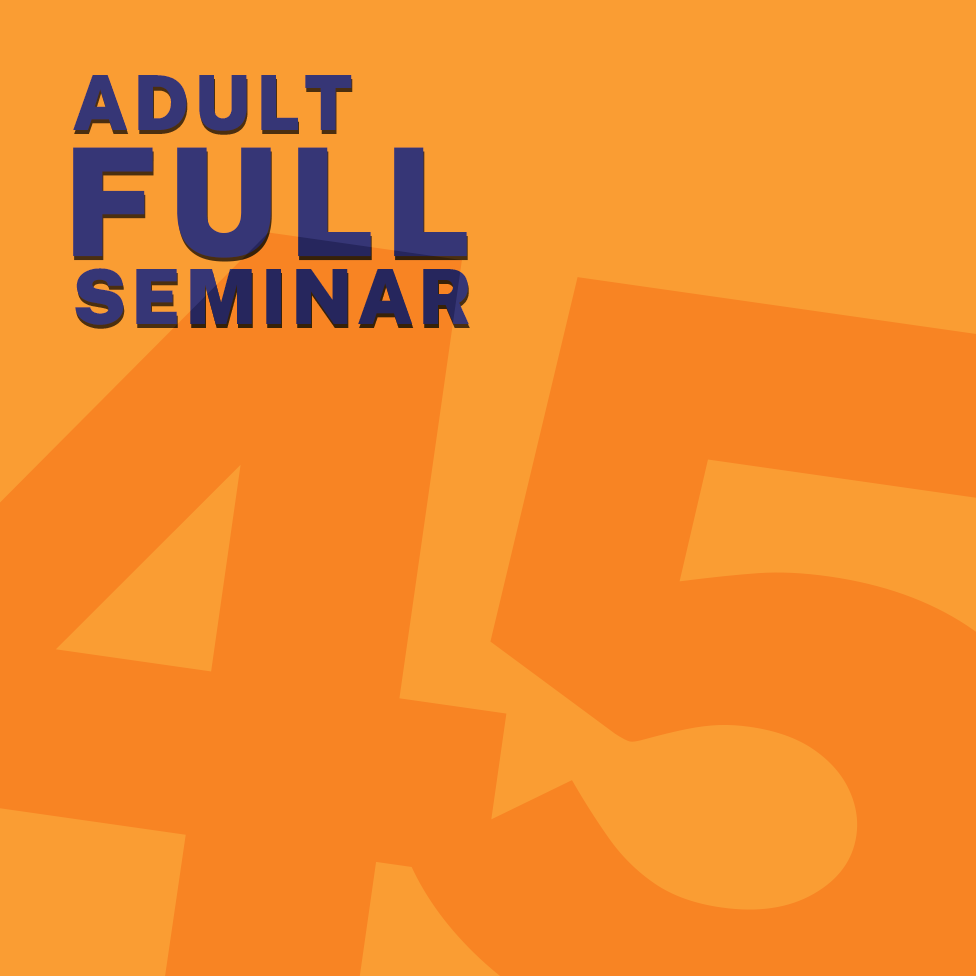
<style>
.page{position:relative;width:976px;height:976px;background:#f88423}
.page>*{position:absolute;margin:0}
.t1{font:76px/68px "PublicSansRoman-Black";letter-spacing:0.06em;color:#363676}
.t2{font:76px/132px "PublicSansRoman-Black";letter-spacing:0.06em;color:#363676}
.t3{font:150px/132px "PublicSansRoman-Black";letter-spacing:0.06em;color:#363676}
</style>
<div class="page">
<p class="t1" style="left:73px;top:75px;width:396px;height:250px"><span class="t2">ADULT<br></span><span class="t3">FULL<br></span>SEMINAR</p>
</div>
